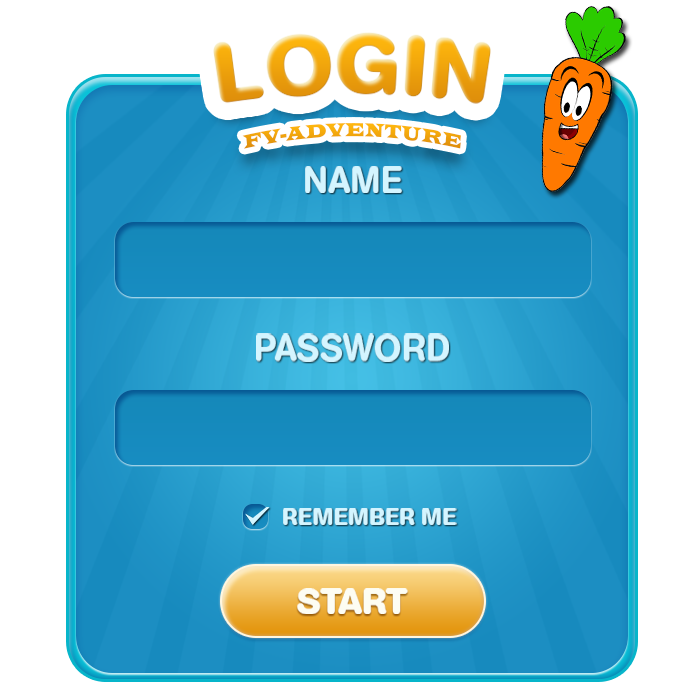
<style>
.page{position:relative;width:700px;height:700px;background:#ffffff}
.page>*{position:absolute;margin:0}
.t1{font:83.9px "AGBookRounded-Bold";color:#0c2d5f;text-transform:uppercase}
.t2{font:83.9px "AGBookRounded-Bold";color:#f8a900;text-transform:uppercase}
.t3{font:20.3px "LatinWide";color:#f3a80c;text-transform:uppercase;scale:0.68 1}
.t4{font:37.3px "AGBookRounded-Medium";color:#d4f5ff;text-transform:uppercase}
.t5{font:23.3px "AGBookRounded-Bold";color:#d4f5ff;text-transform:uppercase}
.t6{font:37.3px "AGBookRounded-Bold";color:#fdfdf3;text-transform:uppercase}
</style>
<div class="page">
<p class="t1" style="left:213px;top:32px;width:278px;height:72px"><span class="t2">L</span>OGIN</p>
<p class="t3" style="left:242px;top:123px;width:219px;height:26px">fv-adventure</p>
<p class="t4" style="left:305px;top:166px;width:97px;height:27px">NAME</p>
<p class="t4" style="left:256px;top:333px;width:193px;height:29px">PASSWORD</p>
<p class="t5" style="left:283px;top:508px;width:174px;height:17px">REMEMBER ME</p>
<p class="t6" style="left:297px;top:588px;width:111px;height:26px">START</p>
</div>
